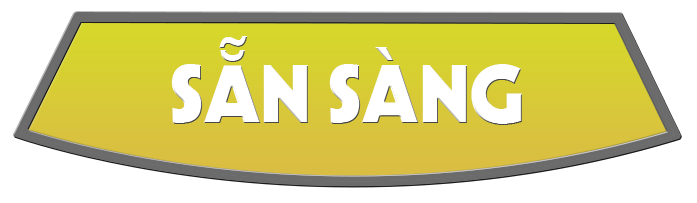
<style>
.page{position:relative;width:697px;height:203px;background:#ffffff}
.page>*{position:absolute;margin:0}
.t1{font:100px "SVN-Internation";color:#ffffff}
</style>
<div class="page">
<p class="t1" style="left:171px;top:36px;width:351px;height:89px">SẴN SÀNG</p>
</div>
